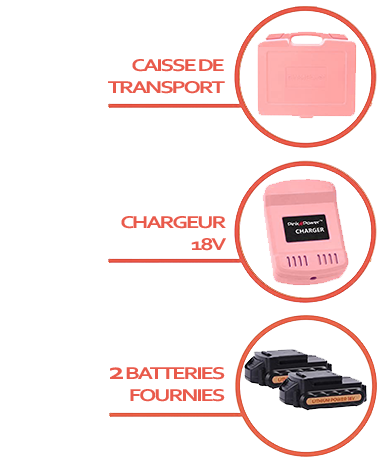
<style>
.page{position:relative;width:384px;height:463px;background:#ffffff}
.page>*{position:absolute;margin:0}
.t1{font:18px "Corbel-Bold";letter-spacing:-0.095em;color:#e95a4b;scale:1.32 1}
.t2{font:24px "Corbel-Bold";letter-spacing:-0.095em;color:#e95a4b;scale:1.32 1}
</style>
<div class="page">
<p class="t1" style="left:108px;top:59px;width:117px;height:35px;text-align:right">CAISSE DE <br>TRANSPORT</p>
<p class="t1" style="left:121px;top:216px;width:105px;height:35px;text-align:right">CHARGEUR<br>18V</p>
<p class="t1" style="left:110px;top:367px;width:115px;height:35px;text-align:right"><span class="t2">2 </span>BATTERIES<br>FOURNIES</p>
</div>
